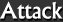
<style>
.page{position:relative;width:63px;height:22px;background:#333333}
.page>*{position:absolute;margin:0}
.t1{font:24px "Narkisim";color:#ffffff}
</style>
<div class="page">
<p class="t1" style="left:0px;top:1px;width:63px;height:18px">Attack</p>
</div>
